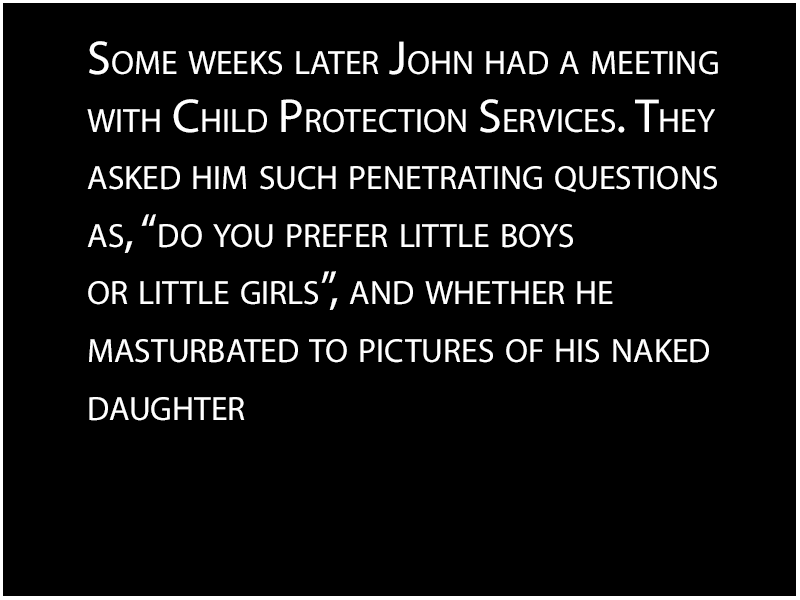
<style>
.page{position:relative;width:800px;height:600px;background:#000000}
.page>*{position:absolute;margin:0}
.t1{font:48px "MyriadPro-Regular";color:#ffffff;font-variant:small-caps}
</style>
<div class="page">
<p class="t1" style="left:87px;top:41px;width:631px;height:380px">Some weeks later John had a meeting<br>with Child Protection Services. They <br>asked him such penetrating questions<br>as, “do you prefer little boys <br>or little girls”, and whether he <br>masturbated to pictures of his naked <br>daughter</p>
</div>
